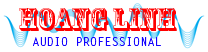
<style>
.page{position:relative;width:208px;height:52px;background:#ffffff}
.page>*{position:absolute;margin:0}
.t1{font:30px "RosewoodStd-Regular";color:#ff0000}
.t2{font:12px "LetterGothicStd";color:#1200ff}
</style>
<div class="page">
<p class="t1" style="left:19px;top:8px;width:158px;height:23px">hOANG LINH</p>
<p class="t2" style="left:33px;top:37px;width:128px;height:9px">AUDIO PROFESSIONAL</p>
</div>
